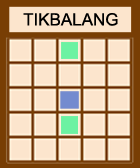
<style>
.page{position:relative;width:140px;height:168px;background:#fce5cd}
.page>*{position:absolute;margin:0}
.t1{font:17px "ArialMT";color:#000000}
</style>
<div class="page">
<p class="t1" style="left:23px;top:13px;width:95px;height:13px">TIKBALANG</p>
</div>
